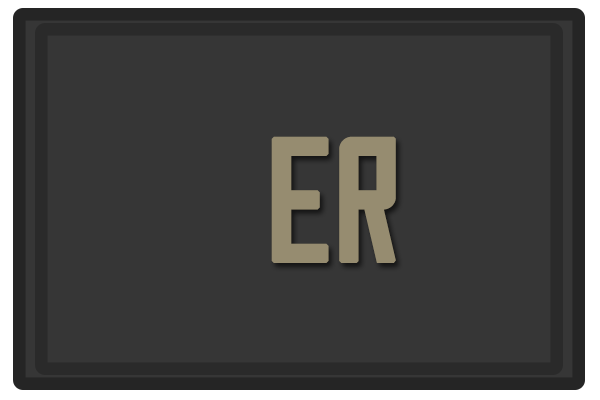
<style>
.page{position:relative;width:600px;height:400px;background:#363636}
.page>*{position:absolute;margin:0}
.t1{font:152.4px "SAOUI-Regular";color:#968c70;font-weight:bold}
</style>
<div class="page">
<p class="t1" style="left:271px;top:136px;width:125px;height:127px">ER</p>
</div>
